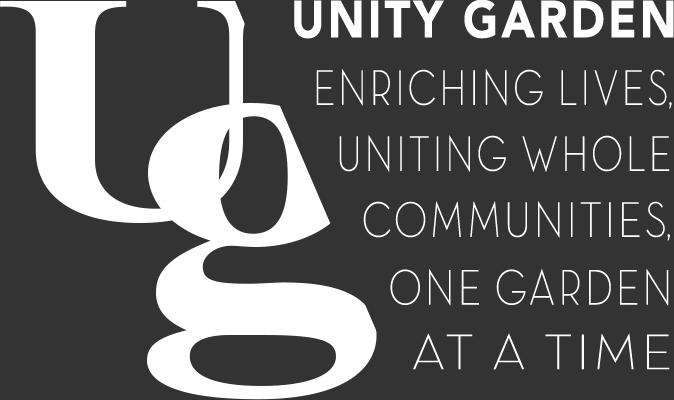
<style>
.page{position:relative;width:674px;height:400px;background:#333333}
.page>*{position:absolute;margin:0}
.t1{font:51.7px "Avenir-Black";letter-spacing:0.075em;color:#ffffff;scale:0.87 1}
.t2{font:50.8px "ADELE-Light";letter-spacing:0.075em;color:#ffffff;scale:0.79 1}
.t3{font:50.8px "ADELE-Light";letter-spacing:-0.025em;color:#ffffff;scale:0.79 1}
.t4{font:50.8px "ADELE-Light";letter-spacing:-0.025em;color:#ffffff;scale:0.76 1}
.t5{font:50.7px "ADELE-Light";letter-spacing:0.075em;color:#ffffff;scale:0.79 1}
.t6{font:50.7px "ADELE-Light";letter-spacing:0.075em;color:#ffffff;scale:0.83 1}
.t7{font:50.7px "ADELE-Light";letter-spacing:-0.025em;color:#ffffff;scale:0.83 1}
.t8{font:50.7px "ADELE-Light";letter-spacing:-0.025em;color:#ffffff;scale:0.76 1}
.t9{font:50.8px "ADELE-Light";letter-spacing:0.075em;color:#ffffff;scale:0.83 1}
.t10{font:50.8px "ADELE-Light";letter-spacing:0.075em;color:#ffffff;scale:1.07 1}
</style>
<div class="page">
<p class="t1" style="left:294px;top:0px;width:380px;height:39px">UNITY GARDEN</p>
<p class="t2" style="left:316px;top:69px;width:356px;height:40px">ENRICHING LIVE<span class="t3">S</span><span class="t4">,</span></p>
<p class="t5" style="left:339px;top:135px;width:331px;height:37px">UNITING WHOLE</p>
<p class="t6" style="left:363px;top:201px;width:307px;height:40px">COMMUNITIE<span class="t7">S</span><span class="t8">,</span></p>
<p class="t9" style="left:390px;top:269px;width:279px;height:37px">ONE GARDEN</p>
<p class="t10" style="left:413px;top:333px;width:257px;height:37px">AT A TIME</p>
</div>
